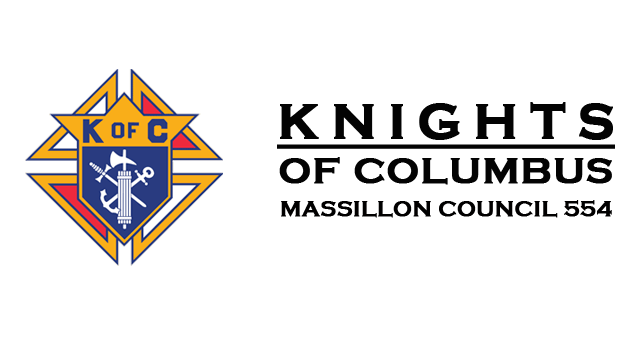
<style>
.page{position:relative;width:637px;height:357px;background:#ffffff}
.page>*{position:absolute;margin:0}
.t1{font:22px/33px "CopperplateGothic-Bold";color:#010000;font-weight:bold}
.t2{font:51px "CopperplateGothic-Bold";letter-spacing:0.22em;color:#030303;font-weight:bold;text-decoration:underline}
.t3{font:51px "CopperplateGothic-Bold";color:#030303;font-weight:bold;text-decoration:underline}
.t4{font:38px "CopperplateGothic-Bold";letter-spacing:0.02em;color:#030303;font-weight:bold}
</style>
<div class="page">
<p class="t1" style="left:277px;top:102px;width:338px;height:116px;text-align:center"><span class="t2">KNIGHT</span><span class="t3">S<br></span><span class="t4">OF COLUMBUS<br></span>MASSILLON COUNCIL 554</p>
</div>
